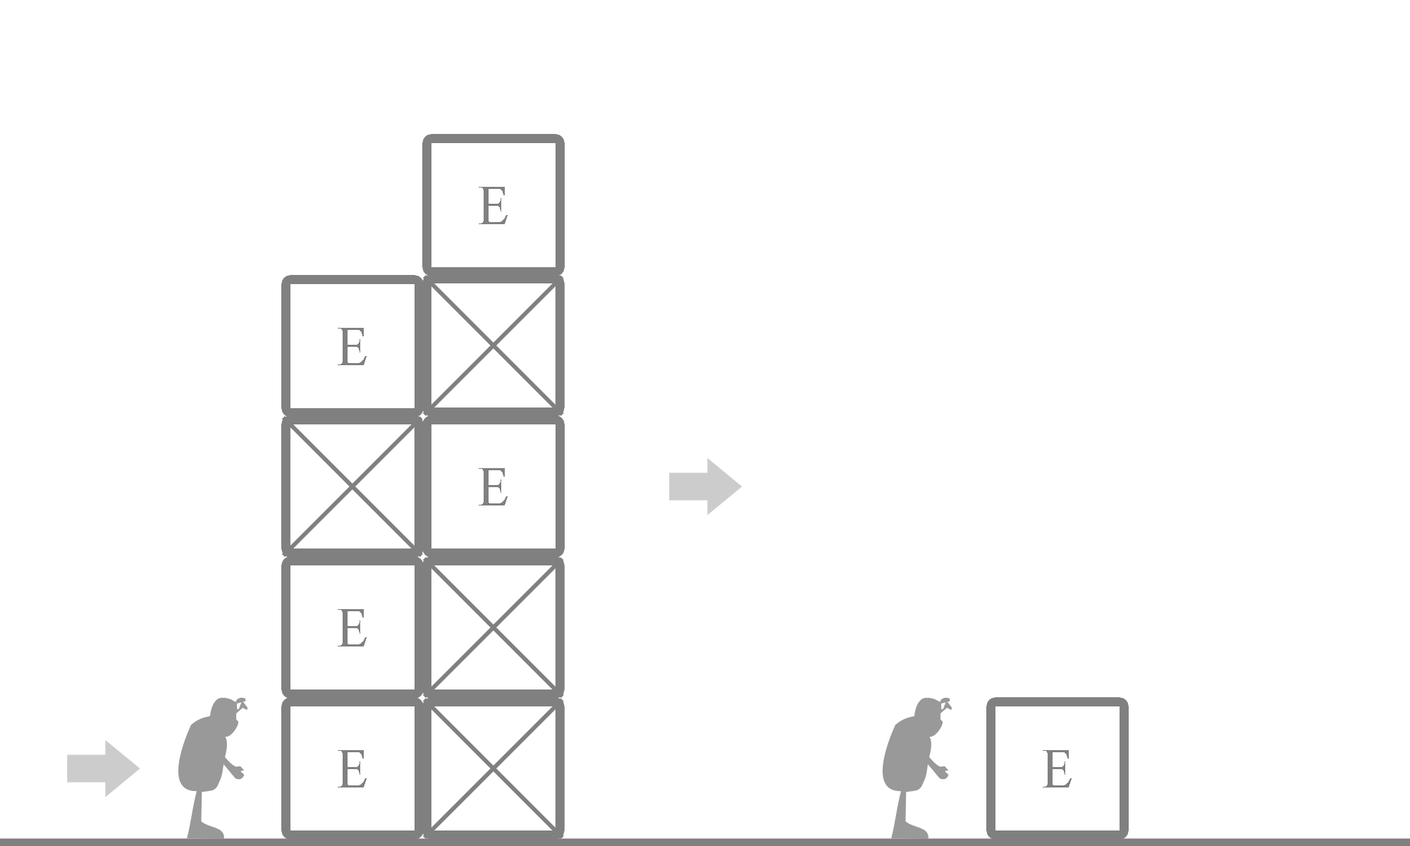
<style>
.page{position:relative;width:1410px;height:846px;background:#ffffff}
.page>*{position:absolute;margin:0}
.t1{font:56.4px "TimesNewRomanPSMT";letter-spacing:0.05em;color:#808080;scale:0.9 1}
</style>
<div class="page">
<p class="t1" style="left:479px;top:187px;width:29px;height:37px">E</p>
<p class="t1" style="left:338px;top:328px;width:29px;height:37px">E</p>
<p class="t1" style="left:479px;top:468px;width:29px;height:37px">E</p>
<p class="t1" style="left:338px;top:609px;width:29px;height:37px">E</p>
<p class="t1" style="left:338px;top:750px;width:29px;height:37px">E</p>
<p class="t1" style="left:1043px;top:750px;width:28px;height:37px">E</p>
</div>
